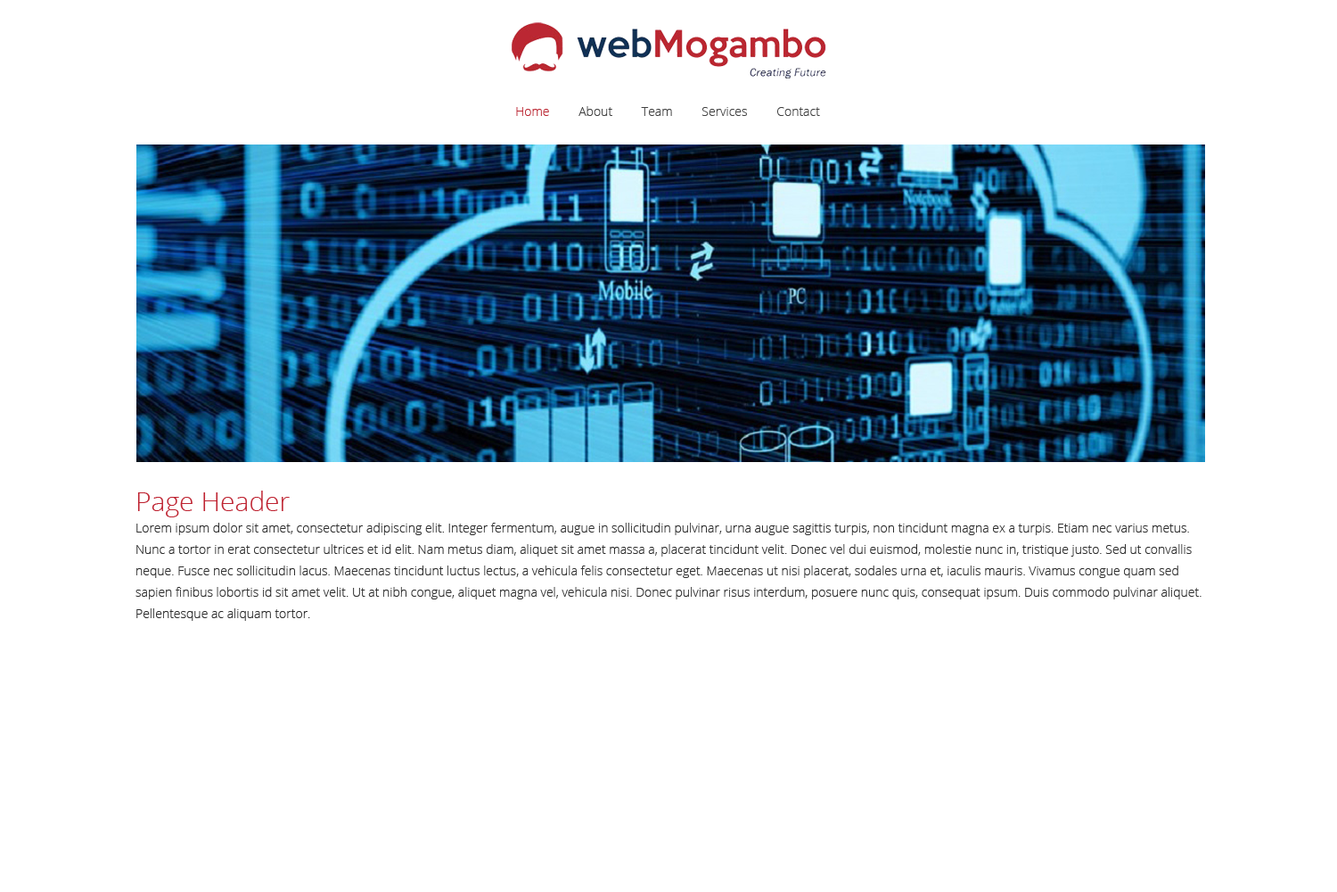
<style>
.page{position:relative;width:1337px;height:892px;background:#ffffff}
.page>*{position:absolute;margin:0}
.t1{font:12.5px "OpenSans-Light";color:#424242}
.t2{font:12.5px "OpenSans-Light";color:#bb2733}
.t3{font:12.5px/21.4px "OpenSans-Light";color:#2e2e2e}
.t4{font:26.7px/21.4px "OpenSans-Light";color:#be2230}
</style>
<div class="page">
<p class="t1" style="left:516px;top:106px;width:304px;height:10px"><span class="t2">Home </span>        About         Team         Services         Contact</p>
<p class="t3" style="left:136px;top:490px;width:1066px;height:131px"><span class="t4">Page Header<br></span>Lorem ipsum dolor sit amet, consectetur adipiscing elit. Integer fermentum, augue in sollicitudin pulvinar, urna augue sagittis turpis, non tincidunt magna ex a turpis. Etiam nec varius metus. Nunc a tortor in erat consectetur ultrices et id elit. Nam metus diam, aliquet sit amet massa a, placerat tincidunt velit. Donec vel dui euismod, molestie nunc in, tristique justo. Sed ut convallis neque. Fusce nec sollicitudin lacus. Maecenas tincidunt luctus lectus, a vehicula felis consectetur eget. Maecenas ut nisi placerat, sodales urna et, iaculis mauris. Vivamus congue quam sed sapien finibus lobortis id sit amet velit. Ut at nibh congue, aliquet magna vel, vehicula nisi. Donec pulvinar risus interdum, posuere nunc quis, consequat ipsum. Duis commodo pulvinar aliquet. Pellentesque ac aliquam tortor.</p>
</div>
